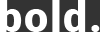
<style>
.page{position:relative;width:100px;height:32px;background:#333333}
.page>*{position:absolute;margin:0}
.t1{font:42.7px "Roboto-Black";letter-spacing:0.04em;color:#ffffff}
</style>
<div class="page">
<p class="t1" style="left:0px;top:0px;width:100px;height:32px">bold.</p>
</div>
